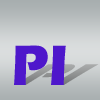
<style>
.page{position:relative;width:100px;height:100px}
.page>*{position:absolute;margin:0}
.t1{font:58.7px "ErasITC-Bold";color:#4e17cb}
.t2{font:58.2px "ErasITC-Bold"}
</style>
<div class="page">
<p class="t1" style="left:14px;top:45px;width:52px;height:40px">PI</p>
<p class="t2" style="left:14px;top:64px;width:85px;height:21px">PI</p>
</div>
